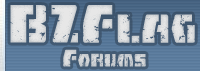
<style>
.page{position:relative;width:200px;height:71px}
.page>*{position:absolute;margin:0}
.t1{font:53.9px "FireFightBB";color:#e7e7e7}
.t2{font:40.5px "FireFightBB";color:#e7e7e7}
.t3{font:18px "FireFightBB";color:#ced1d4}
.t4{font:24px "FireFightBB";color:#ced1d4}
</style>
<div class="page">
<p class="t1" style="left:10px;top:5px;width:185px;height:38px">BZF<span class="t2">lag</span></p>
<p class="t3" style="left:63px;top:49px;width:83px;height:18px"><span class="t4">F</span>orums</p>
</div>
